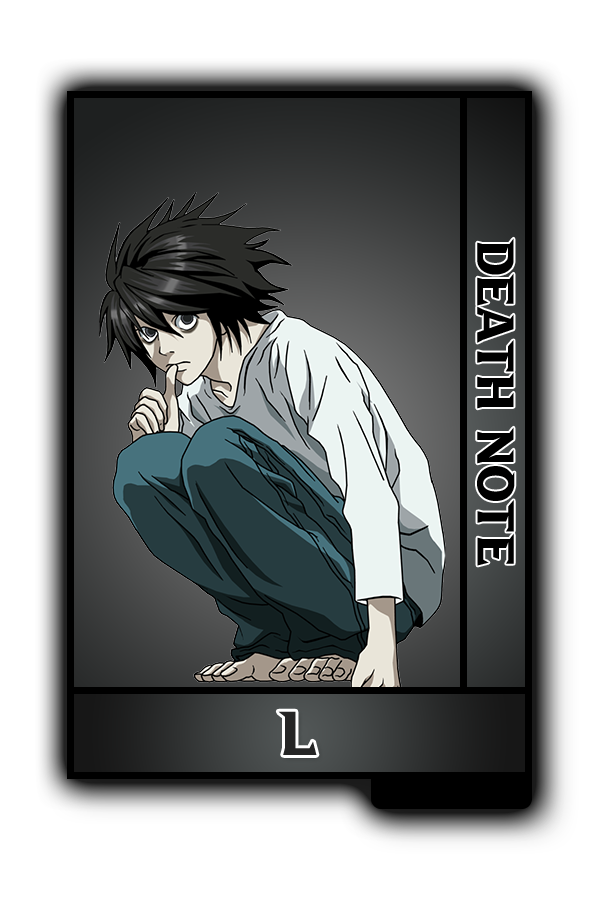
<style>
.page{position:relative;width:600px;height:900px;background:#ffffff}
.page>*{position:absolute;margin:0}
.t1{font:48.8px "aAbsoluteEmpire";color:#000000}
.t2{font:58.3px "aAbsoluteEmpire";color:#252525}
</style>
<div class="page">
<p class="t1" style="left:477px;top:238px;width:38px;height:328px;rotate:90deg">Death Note</p>
<p class="t2" style="left:278px;top:711px;width:39px;height:44px">L</p>
</div>
